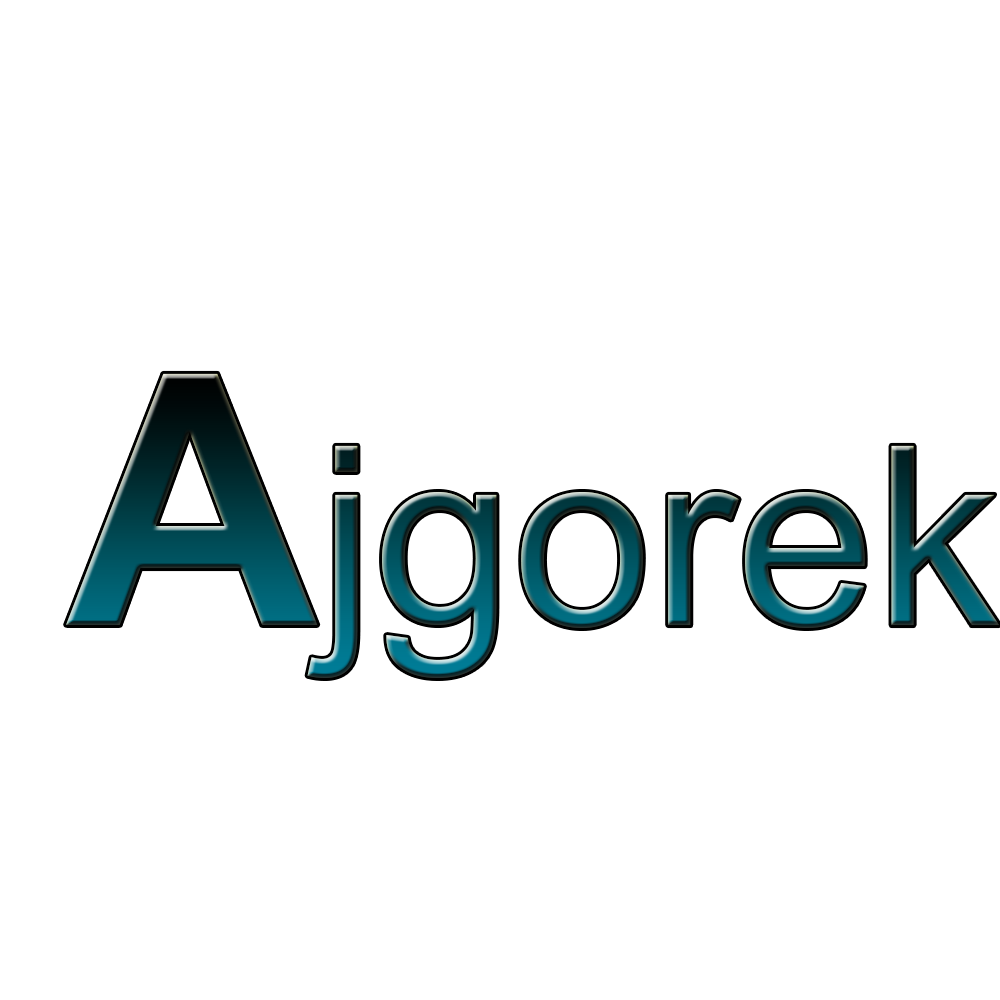
<style>
.page{position:relative;width:1000px;height:1000px;background:#ffffff}
.page>*{position:absolute;margin:0}
.t1{font:250px "ArialMT"}
.t2{font:350px "Arial-BoldMT"}
</style>
<div class="page">
<p class="t1" style="left:66px;top:373px;width:933px;height:305px"><span class="t2">A</span>jgorek</p>
</div>
